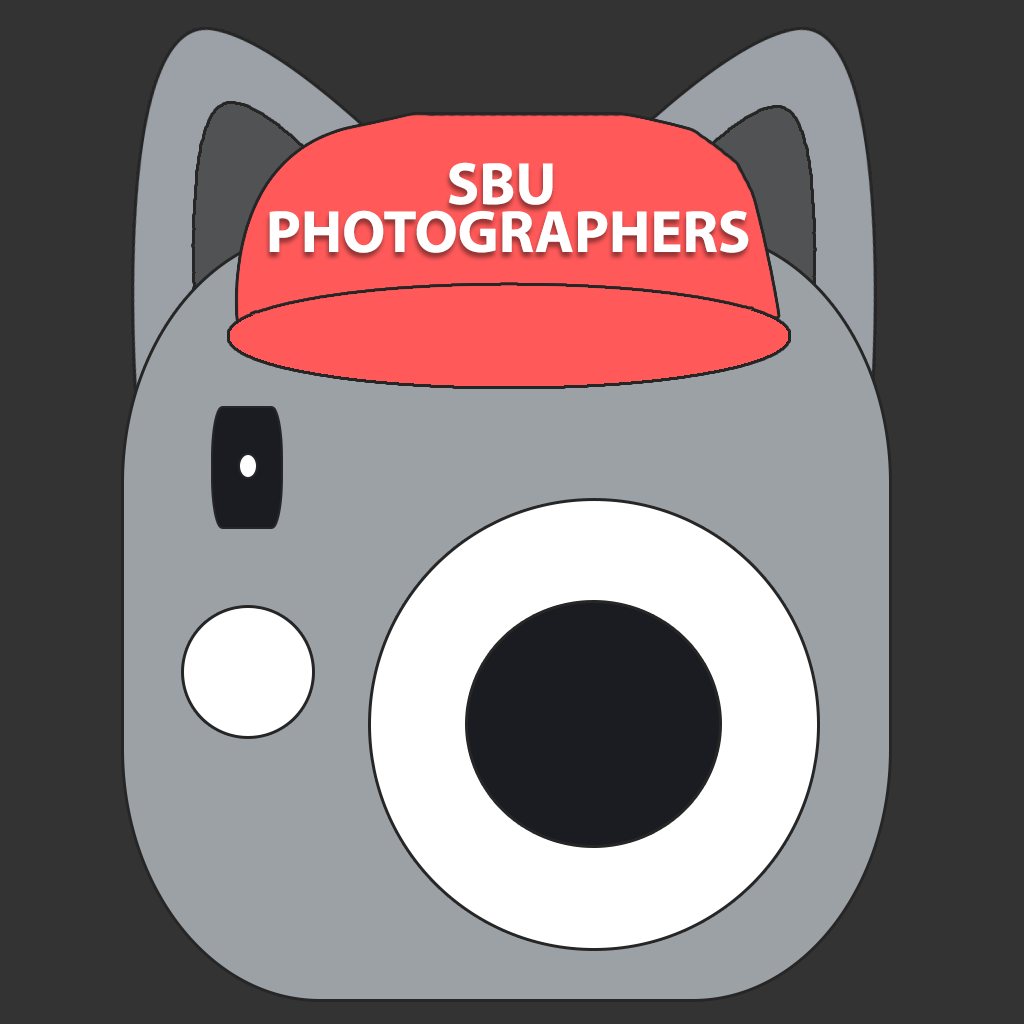
<style>
.page{position:relative;width:1024px;height:1024px;background:#333333}
.page>*{position:absolute;margin:0}
.t1{font:60px/48px "MyriadPro-Bold";color:#ffffff}
</style>
<div class="page">
<p class="t1" style="left:269px;top:162px;width:480px;height:91px">SBU <br>PHOTOGRAPHERS</p>
</div>
